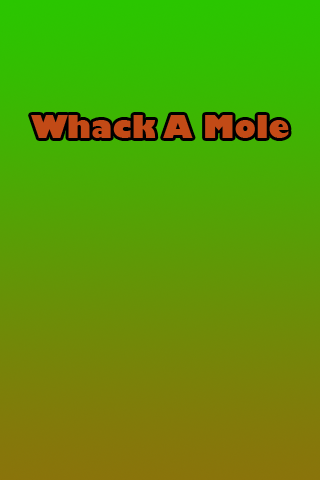
<style>
.page{position:relative;width:320px;height:480px}
.page>*{position:absolute;margin:0}
.t1{font:30px "GillSans-UltraBold";color:#c24a16}
</style>
<div class="page">
<p class="t1" style="left:31px;top:115px;width:258px;height:23px">Whack A Mole</p>
</div>
